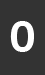
<style>
.page{position:relative;width:45px;height:75px;background:#333333}
.page>*{position:absolute;margin:0}
.t1{font:42px "Sarala-Bold";letter-spacing:0.005em;color:#ffffff}
</style>
<div class="page">
<p class="t1" style="left:10px;top:21px;width:24px;height:31px">0</p>
</div>
